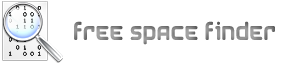
<style>
.page{position:relative;width:291px;height:64px;background:#ffffff}
.page>*{position:absolute;margin:0}
.t1{font:22px "AirstripFour";color:#898989}
</style>
<div class="page">
<p class="t1" style="left:74px;top:21px;width:201px;height:24px">Free Space Finder</p>
</div>
